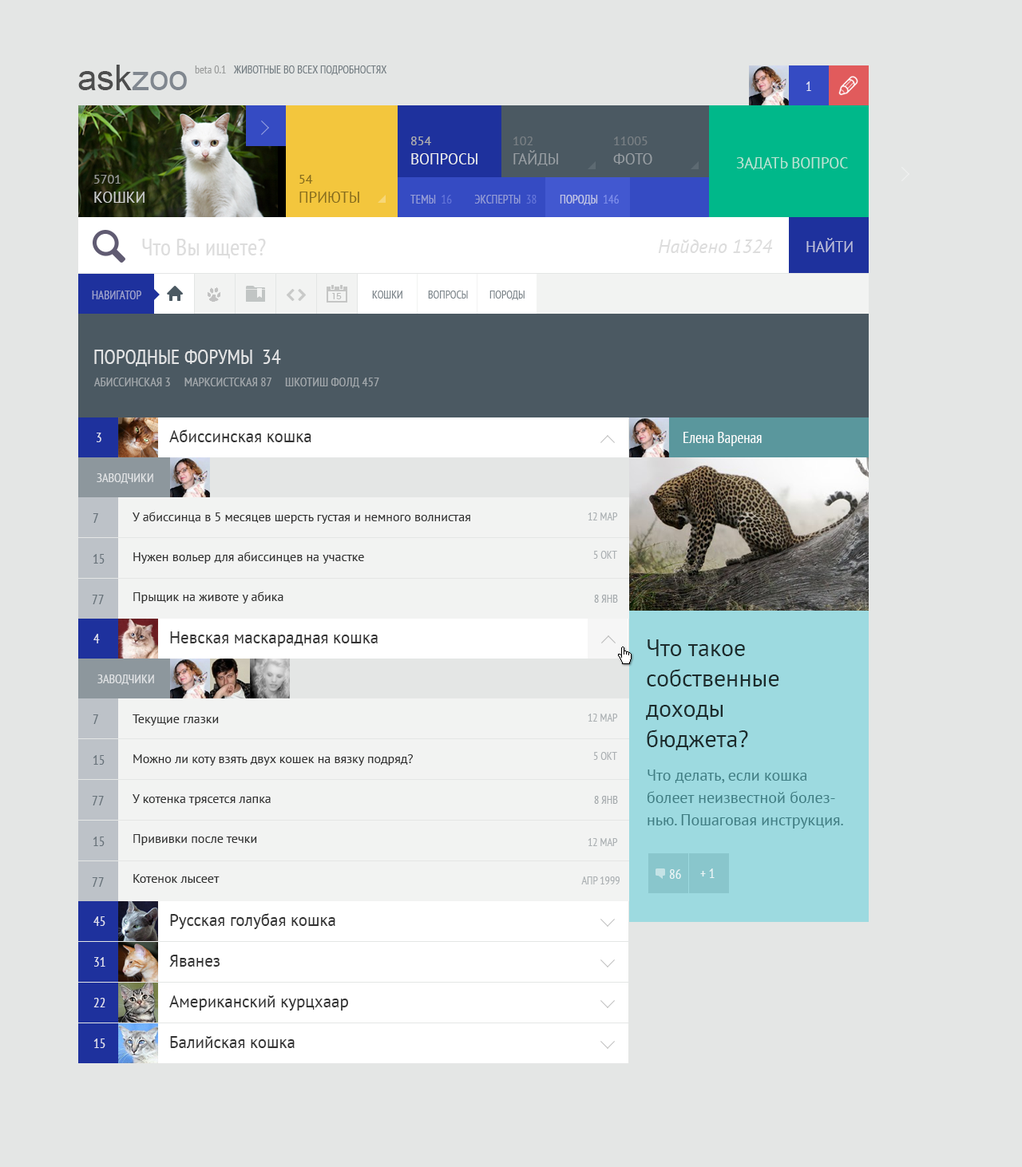
<style>
.page{position:relative;width:1022px;height:1167px;background:#e4e6e5}
.page>*{position:absolute;margin:0}
.t1{font:35.1px "ArialMT"}
.t2{font:11.2px "PTSans-Narrow";color:#9a9c9b}
.t3{font:11.2px "PTSans-Narrow";color:#737d82;text-transform:uppercase}
.t4{font:13.6px "PTSans-Narrow";color:#e1e3f4}
.t5{font:15.2px/19.2px "PTSans-Regular";color:#ebecee;text-transform:uppercase}
.t6{font:12.8px/19.2px "PTSans-Regular";color:#aeaeae;text-transform:uppercase}
.t7{font:15.2px/19.2px "PTSans-Regular";color:#989ea3;text-transform:uppercase}
.t8{font:12.8px/19.2px "PTSans-Regular";color:#989ea3;text-transform:uppercase}
.t9{font:12.8px/19.2px "PTSans-Regular";text-transform:uppercase}
.t10{font:15.2px/19.2px "PTSans-Regular";text-transform:uppercase}
.t11{font:15.2px "PTSans-Regular";color:#b8e4d5;text-transform:uppercase}
.t12{font:15.2px/19.2px "PTSans-Regular";color:#cdcecf;text-transform:uppercase}
.t13{font:12.8px/19.2px "PTSans-Regular";color:#cdcecf;text-transform:uppercase}
.t14{font:15.2px/19.2px "PTSans-Regular";color:#866c1d;text-transform:uppercase}
.t15{font:12.8px/19.2px "PTSans-Regular";color:#866c1d;text-transform:uppercase}
.t16{font:12px "PTSans-Narrow";text-transform:uppercase}
.t17{font:12px "PTSans-Narrow";color:#c1c5e5;text-transform:uppercase}
.t18{font:23.9px "PTSans-Narrow";color:#dddddd}
.t19{font:19.2px "PTSans-Italic";color:#dddddd}
.t20{font:15.2px "PTSans-Regular";color:#bcbfdb;text-transform:uppercase}
.t21{font:12px "PTSans-Narrow";color:#9ea3cd;text-transform:uppercase}
.t22{font:11.2px "PTSans-Narrow";color:#7b848a;text-transform:uppercase}
.t23{font:20.8px "PTSans-Narrow";color:#e3e4e5;text-transform:uppercase}
.t24{font:12.8px "PTSans-Narrow";color:#a2a8ac;text-transform:uppercase}
.t25{font:13.6px "PTSans-Narrow";color:#dfe0ed}
.t26{font:16.8px "PTSans-Regular";color:#343434}
.t27{font:12.8px "PTSans-Narrow";color:#e1e3e5;text-transform:uppercase}
.t28{font:13.6px "PTSans-Narrow";color:#67727a}
.t29{font:12.8px/39.9px "PTSans-Regular";color:#313131}
.t30{font:11.2px "PTSans-Narrow";color:#abb0b3;text-transform:uppercase}
.t31{font:11.2px "PTSans-Narrow";color:#a4a9ac;text-transform:uppercase}
</style>
<div class="page">
<p class="t1" style="left:78px;top:65px;width:109px;height:25px">askzoo</p>
<p class="t2" style="left:195px;top:65px;width:31px;height:8px">beta 0.1</p>
<p class="t3" style="left:233px;top:65px;width:154px;height:10px">животные во всех подробностях</p>
<p class="t4" style="left:805px;top:81px;width:6px;height:10px">1</p>
<p class="t5" style="left:411px;top:137px;width:66px;height:27px"><span class="t6">854<br></span>вопросы</p>
<p class="t7" style="left:513px;top:137px;width:45px;height:29px"><span class="t8">102<br></span>гайды</p>
<p class="t9" style="left:613px;top:137px;width:39px;height:27px">11005<br><span class="t10">фото</span></p>
<p class="t11" style="left:736px;top:157px;width:112px;height:13px">задать вопрос</p>
<p class="t12" style="left:94px;top:175px;width:50px;height:28px"><span class="t13">5701<br></span>кошки</p>
<p class="t14" style="left:299px;top:175px;width:60px;height:28px"><span class="t15">54<br></span>приюты</p>
<p class="t16" style="left:410px;top:195px;width:209px;height:10px">темы  16         эксперты  38         породы  146</p>
<p class="t17" style="left:560px;top:195px;width:59px;height:10px">породы  146</p>
<p class="t18" style="left:142px;top:239px;width:124px;height:20px">Что Вы ищете?</p>
<p class="t19" style="left:658px;top:239px;width:115px;height:14px">Найдено 1324</p>
<p class="t20" style="left:806px;top:238px;width:47px;height:14px">Найти</p>
<p class="t21" style="left:92px;top:291px;width:49px;height:8px">навигатор</p>
<p class="t22" style="left:372px;top:291px;width:30px;height:8px">кошки</p>
<p class="t22" style="left:428px;top:291px;width:40px;height:8px">вопросы</p>
<p class="t22" style="left:489px;top:291px;width:35px;height:9px">породы</p>
<p class="t23" style="left:94px;top:350px;width:187px;height:16px">породные форумы  34</p>
<p class="t24" style="left:93px;top:378px;width:286px;height:10px">Абиссинская 3     марксистская 87     шкотиш фолд 457</p>
<p class="t25" style="left:97px;top:433px;width:4px;height:9px">3</p>
<p class="t26" style="left:169px;top:429px;width:142px;height:13px">Абиссинская кошка</p>
<p class="t27" style="left:97px;top:473px;width:56px;height:11px">заводчики</p>
<p class="t28" style="left:93px;top:513px;width:5px;height:10px">7</p>
<p class="t29" style="left:133px;top:512px;width:337px;height:91px">У абиссинца в 5 месяцев шерсть густая и немного волнистая Нужен вольер для абиссинцев на участке<br>Прыщик на животе у абика<br>Витамины</p>
<p class="t30" style="left:588px;top:512px;width:30px;height:8px">12 мар</p>
<p class="t28" style="left:93px;top:554px;width:12px;height:10px">15</p>
<p class="t30" style="left:593px;top:551px;width:24px;height:8px">5 окт</p>
<p class="t28" style="left:92px;top:595px;width:12px;height:9px">77</p>
<p class="t31" style="left:594px;top:595px;width:24px;height:8px">8 янв</p>
<p class="t25" style="left:93px;top:634px;width:7px;height:9px">4</p>
<p class="t26" style="left:170px;top:631px;width:208px;height:16px">Невская маскарадная кошка</p>
<p class="t27" style="left:97px;top:675px;width:57px;height:10px">заводчики</p>
<p class="t30" style="left:588px;top:714px;width:30px;height:8px">12 мар</p>
<p class="t28" style="left:93px;top:714px;width:5px;height:10px">7</p>
<p class="t29" style="left:133px;top:714px;width:280px;height:169px">Текущие глазки<br>Можно ли коту взять двух кошек на вязку подряд?<br>У котенка трясется лапка<br>Прививки после течки<br>Котенок лысеет</p>
<p class="t28" style="left:93px;top:755px;width:12px;height:10px">15</p>
<p class="t30" style="left:593px;top:752px;width:24px;height:8px">5 окт</p>
<p class="t28" style="left:92px;top:796px;width:12px;height:9px">77</p>
<p class="t31" style="left:594px;top:796px;width:24px;height:8px">8 янв</p>
<p class="t28" style="left:93px;top:837px;width:12px;height:9px">15</p>
<p class="t30" style="left:588px;top:838px;width:30px;height:8px">12 мар</p>
<p class="t28" style="left:92px;top:877px;width:12px;height:10px">77</p>
<p class="t30" style="left:581px;top:876px;width:38px;height:8px">апр 1999</p>
<p class="t25" style="left:93px;top:916px;width:12px;height:10px">45</p>
<p class="t26" style="left:170px;top:913px;width:165px;height:16px">Русская голубая кошка</p>
<p class="t25" style="left:94px;top:957px;width:11px;height:10px">31</p>
<p class="t26" style="left:169px;top:955px;width:51px;height:12px">Яванез</p>
<p class="t25" style="left:93px;top:998px;width:12px;height:9px">22</p>
<p class="t26" style="left:169px;top:995px;width:179px;height:16px">Американский курцхаар</p>
<p class="t26" style="left:170px;top:1036px;width:125px;height:12px">Балийская кошка</p>
<p class="t25" style="left:93px;top:1039px;width:12px;height:9px">15</p>
</div>
